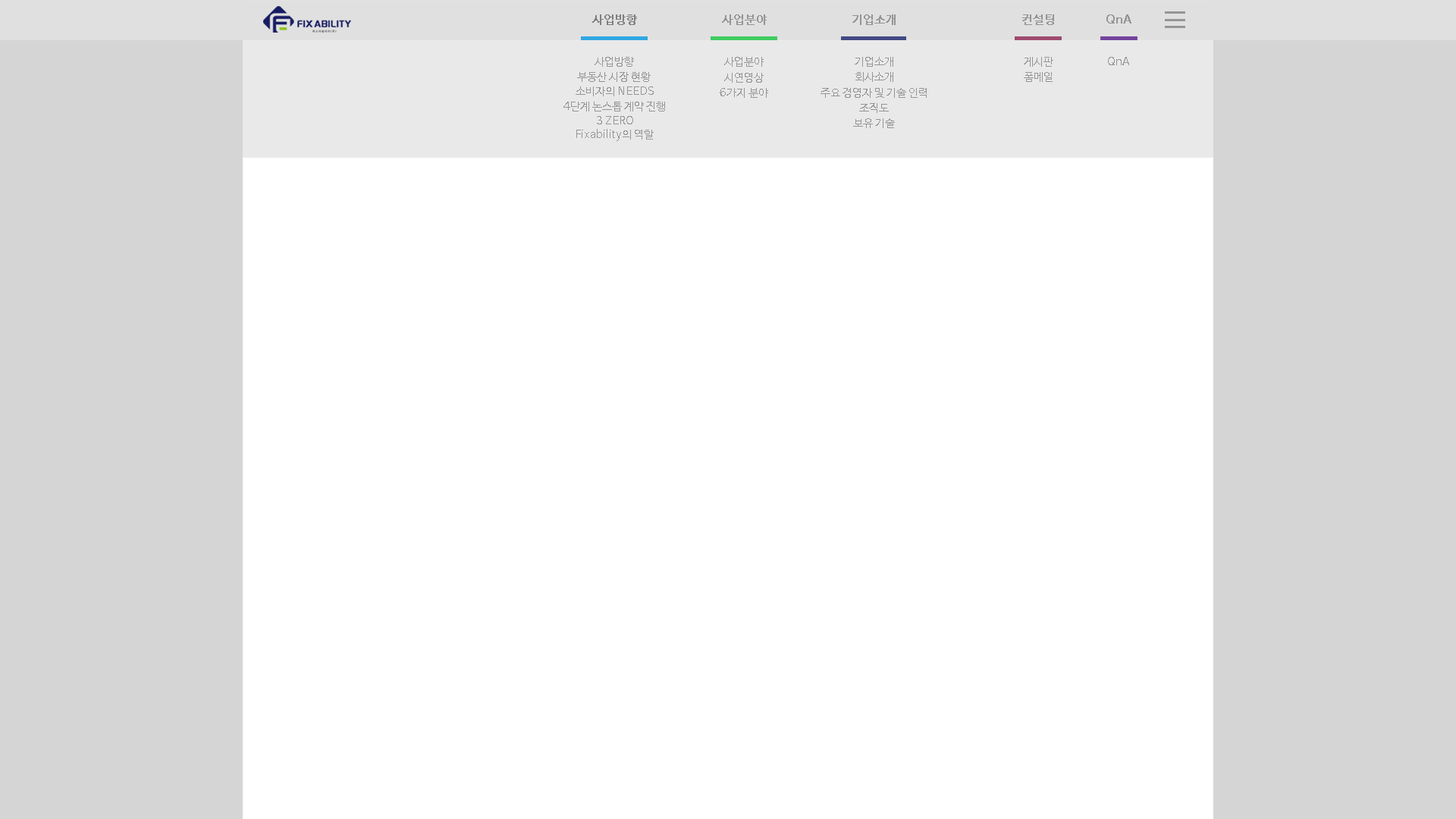
<style>
.page{position:relative;width:1456px;height:819px;background:#ffffff}
.page>*{position:absolute;margin:0}
.t1{font:12.1px "NanumBarunGothic";color:#7f7f7f;font-weight:bold}
.t2{font:11.4px "NanumBarunGothic";color:#969595}
</style>
<div class="page">
<p class="t1" style="left:592px;top:14px;width:45px;height:11px">사업방향</p>
<p class="t1" style="left:722px;top:14px;width:45px;height:11px;opacity:0.8">사업분야</p>
<p class="t1" style="left:852px;top:14px;width:44px;height:11px;opacity:0.8">기업소개</p>
<p class="t1" style="left:1022px;top:14px;width:32px;height:11px;opacity:0.8">컨설팅</p>
<p class="t1" style="left:1106px;top:14px;width:25px;height:10px;opacity:0.8">QnA</p>
<p class="t2" style="left:595px;top:57px;width:39px;height:10px">사업방향</p>
<p class="t2" style="left:724px;top:57px;width:40px;height:10px">사업분야</p>
<p class="t2" style="left:855px;top:57px;width:38px;height:10px">기업소개</p>
<p class="t2" style="left:1024px;top:57px;width:29px;height:10px">게시판</p>
<p class="t2" style="left:1108px;top:57px;width:21px;height:8px">QnA</p>
<p class="t2" style="left:577px;top:72px;width:74px;height:10px">부동산 시장 현황</p>
<p class="t2" style="left:724px;top:73px;width:40px;height:10px">시연영상</p>
<p class="t2" style="left:855px;top:72px;width:38px;height:10px">회사소개</p>
<p class="t2" style="left:1024px;top:72px;width:29px;height:10px">폼메일</p>
<p class="t2" style="left:576px;top:86px;width:78px;height:10px">소비자의 NEEDS</p>
<p class="t2" style="left:720px;top:88px;width:48px;height:10px">6가지 분야</p>
<p class="t2" style="left:821px;top:88px;width:106px;height:10px">주요 경영자 및 기술 인력</p>
<p class="t2" style="left:563px;top:102px;width:102px;height:9px">4단계 논스톱 계약 진행</p>
<p class="t2" style="left:859px;top:103px;width:30px;height:10px">조직도</p>
<p class="t2" style="left:597px;top:116px;width:36px;height:8px">3 ZERO</p>
<p class="t2" style="left:853px;top:118px;width:42px;height:10px">보유 기술</p>
<p class="t2" style="left:576px;top:129px;width:78px;height:12px">Fixability의 역할</p>
</div>
